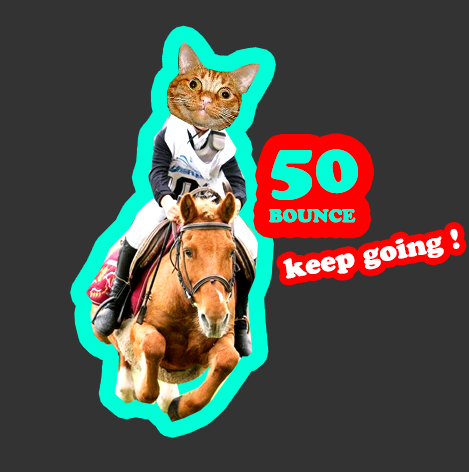
<style>
.page{position:relative;width:469px;height:472px;background:#333333}
.page>*{position:absolute;margin:0}
.t1{font:18px/30px "CooperBlackStd";color:#00ffd8}
.t2{font:72px/30px "CooperBlackStd";color:#00ffd8}
.t3{font:27.3px "CooperBlackStd";color:#ffffff}
</style>
<div class="page">
<p class="t1" style="left:269px;top:149px;width:89px;height:74px"><span class="t2">50<br></span>BOUNCE</p>
<p class="t3" style="left:283px;top:229px;width:177px;height:50px;rotate:-10deg">keep going !</p>
</div>
